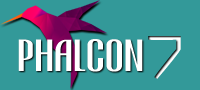
<style>
.page{position:relative;width:200px;height:90px;background:#339999}
.page>*{position:absolute;margin:0}
.t1{font:36px "Atvice-Bold";color:#ffffff}
.t2{font:72px "FZZHYFW--GB1-0";color:#ffffff;scale:1.1 1}
</style>
<div class="page">
<p class="t1" style="left:18px;top:39px;width:125px;height:33px">Phalcon</p>
<p class="t2" style="left:148px;top:36px;width:33px;height:43px">7</p>
</div>
